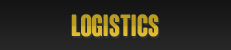
<style>
.page{position:relative;width:231px;height:50px}
.page>*{position:absolute;margin:0}
.t1{font:30px "ColunaRounded-CondensedBold"}
</style>
<div class="page">
<p class="t1" style="left:71px;top:14px;width:88px;height:23px">LOGISTICS</p>
</div>
